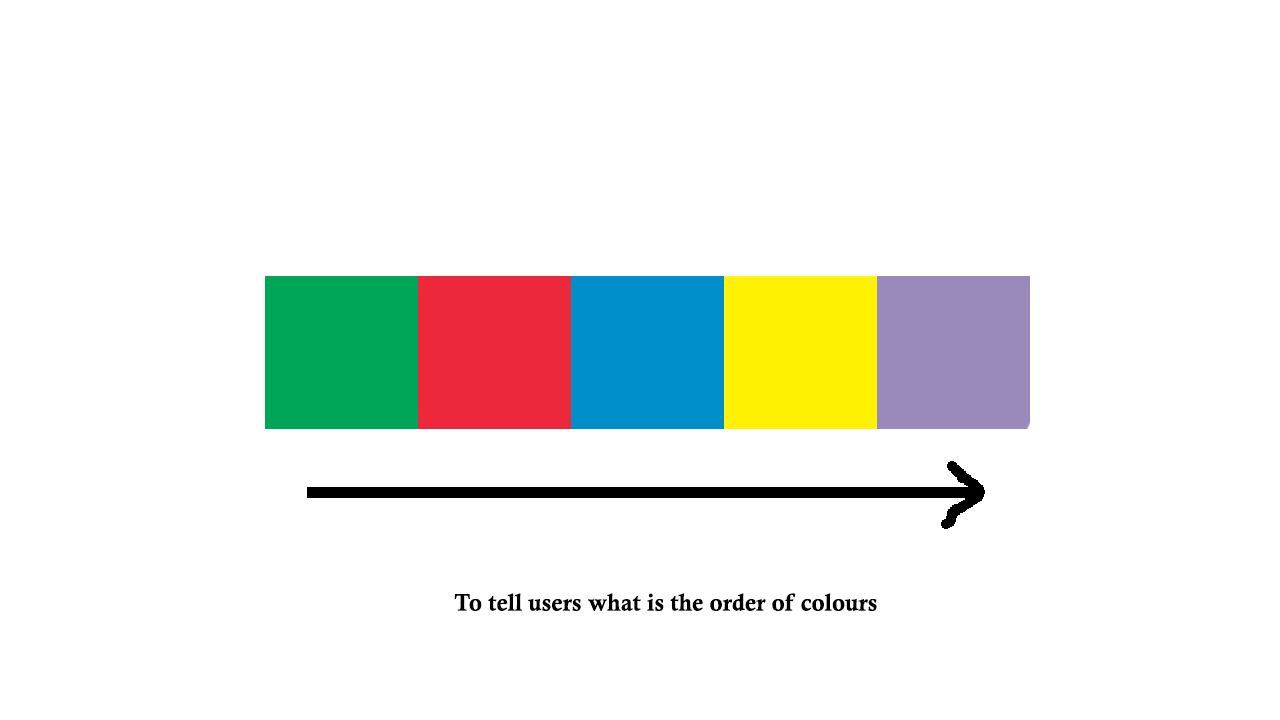
<style>
.page{position:relative;width:1280px;height:720px;background:#ffffff}
.page>*{position:absolute;margin:0}
.t1{font:24px "CalisMTBol";color:#000000}
</style>
<div class="page">
<p class="t1" style="left:454px;top:593px;width:423px;height:18px">To tell users what is the order of colours</p>
</div>
